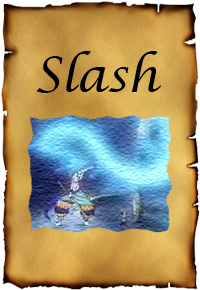
<style>
.page{position:relative;width:200px;height:290px}
.page>*{position:absolute;margin:0}
.t1{font:48px "LucidaCalligraphy-Italic";color:#000000;scale:0.97 1}
</style>
<div class="page">
<p class="t1" style="left:36px;top:51px;width:125px;height:42px">Slash</p>
</div>
